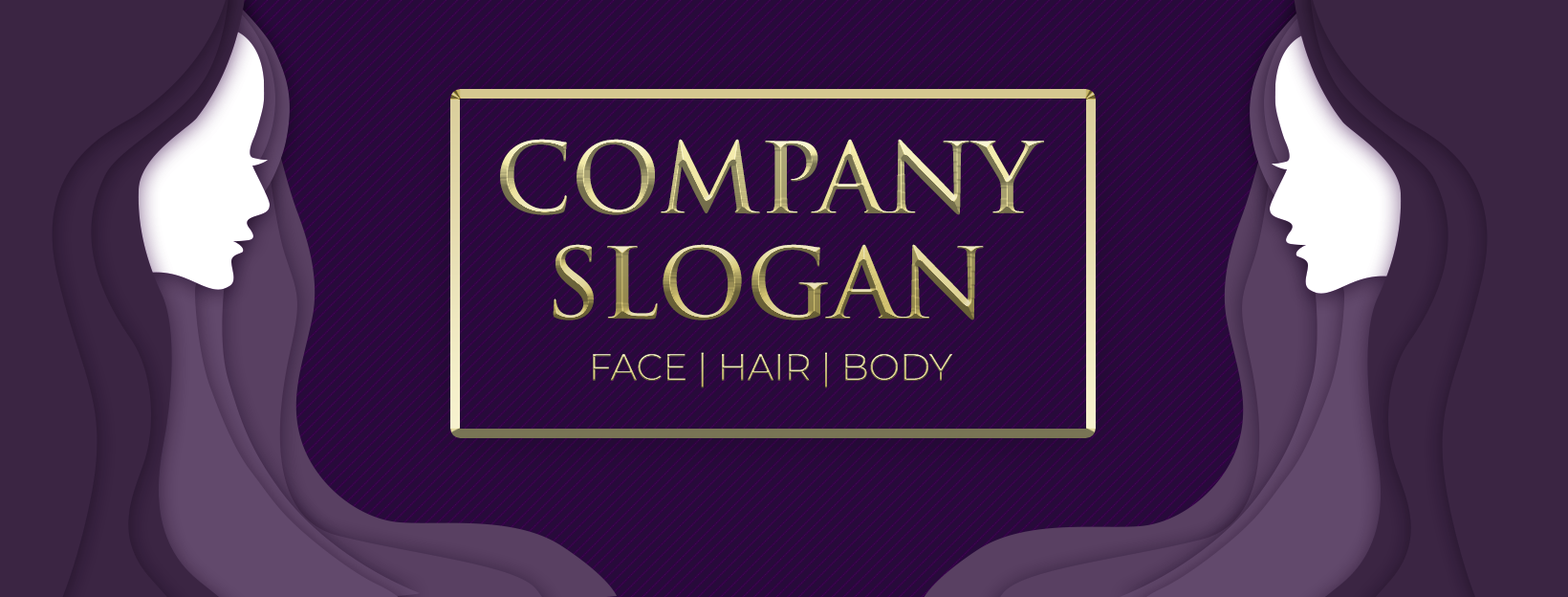
<style>
.page{position:relative;width:1568px;height:597px}
.page>*{position:absolute;margin:0}
.t1{font:95.6px/105.2px "TrajanPro-Bold";text-transform:uppercase}
.t2{font:37px "Montserrat-Light";text-transform:uppercase}
</style>
<div class="page">
<p class="t1" style="left:500px;top:139px;width:544px;height:181px;text-align:center">cOMPANY<br>SLOGAN</p>
<p class="t2" style="left:593px;top:352px;width:359px;height:36px">face | hair | body</p>
</div>
